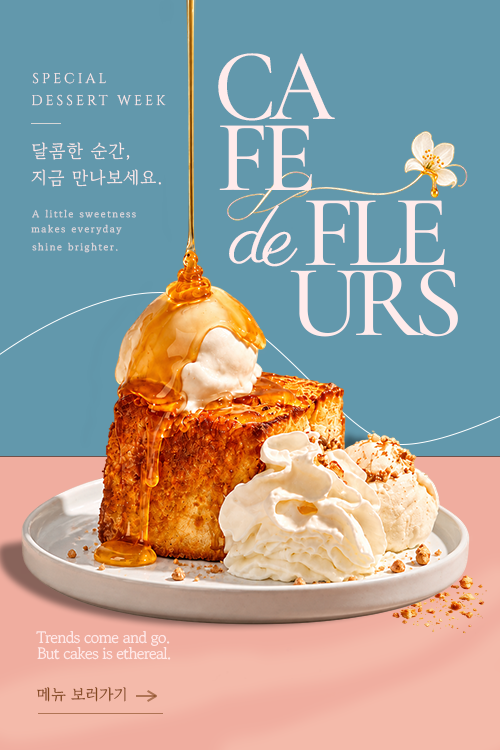
<style>
.page{position:relative;width:500px;height:750px;background:#6298ac}
.page>*{position:absolute;margin:0}
.t1{font:103px "CormorantGaramond-Medium";letter-spacing:-0.08em;color:#ffebeb;scale:0.88 1}
.t2{font:14px "Cinzel-Regular";letter-spacing:0.22em;color:#ffebeb}
.t3{font:103px "CormorantGaramond-Medium";letter-spacing:-0.08em;color:#ffebeb}
.t4{font:18px "GowunBatang-Regular";letter-spacing:0.04em;color:#ffebeb}
.t5{font:10px "GowunBatang-Regular";letter-spacing:0.16em;color:#d8d4d9}
.t6{font:90px "Parisienne-Regular";letter-spacing:-0.08em;color:#ffebeb}
.t7{font:16px "GowunBatang-Regular";letter-spacing:-0.04em;color:#ffebeb}
.t8{font:16px "GowunBatang-Regular";color:#82461c}
</style>
<div class="page">
<p class="t1" style="left:218px;top:53px;width:117px;height:68px">CA</p>
<p class="t2" style="left:32px;top:72px;width:74px;height:12px">SPECIAL</p>
<p class="t2" style="left:32px;top:94px;width:134px;height:12px">DESSERT WEEK</p>
<p class="t3" style="left:219px;top:125px;width:93px;height:65px">FE</p>
<p class="t4" style="left:32px;top:142px;width:98px;height:18px">달콤한 순간,</p>
<p class="t4" style="left:31px;top:169px;width:130px;height:18px">지금 만나보세요.</p>
<p class="t5" style="left:32px;top:209px;width:104px;height:9px">A little sweetness</p>
<p class="t6" style="left:229px;top:205px;width:69px;height:62px">de</p>
<p class="t3" style="left:305px;top:200px;width:140px;height:65px">FLE</p>
<p class="t5" style="left:31px;top:224px;width:91px;height:11px">makes everyday</p>
<p class="t5" style="left:32px;top:242px;width:86px;height:11px">shine brighter.</p>
<p class="t3" style="left:290px;top:269px;width:168px;height:68px">URS</p>
<p class="t7" style="left:36px;top:631px;width:134px;height:15px">Trends come and go.</p>
<p class="t7" style="left:37px;top:647px;width:134px;height:13px">But cakes is ethereal.</p>
<p class="t8" style="left:37px;top:687px;width:89px;height:15px">메뉴 보러가기</p>
</div>
